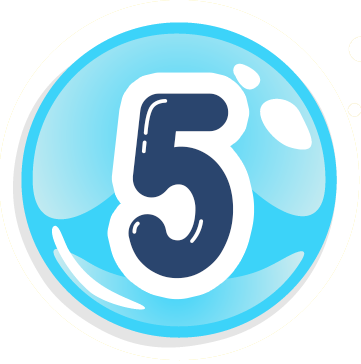
<style>
.page{position:relative;width:361px;height:364px;background:#ffffff}
.page>*{position:absolute;margin:0}
.t1{font:262.5px "BubbleBobble";color:#2a456e}
</style>
<div class="page">
<p class="t1" style="left:128px;top:93px;width:106px;height:186px">5</p>
</div>
